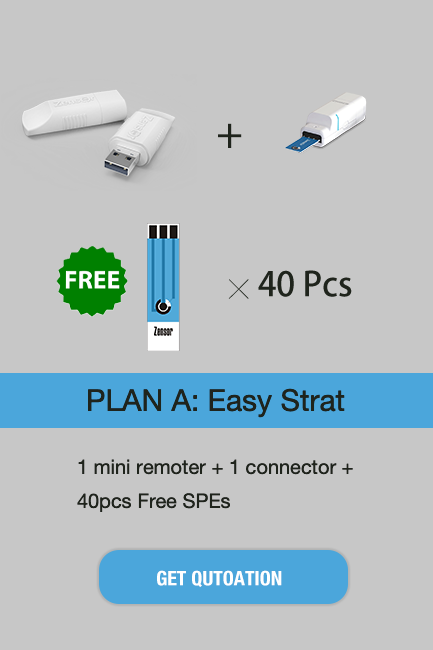
<style>
.page{position:relative;width:433px;height:650px;background:#c7c7c7}
.page>*{position:absolute;margin:0}
.t1{font:40px "AdobeHeitiStd-Regular";color:#1f241c}
.t2{font:33.3px "AdobeHeitiStd-Regular";color:#1f241c}
.t3{font:20px "SimHei";color:#1f241c}
.t4{font:30px "HelveticaNeue";color:#1f241c}
.t5{font:20px/33.8px "HelveticaNeue";color:#1f241c}
.t6{font:20px "HelveticaNeue-CondensedBold";color:#ffffff}
</style>
<div class="page">
<p class="t1" style="left:218px;top:123px;width:24px;height:25px">＋</p>
<p class="t2" style="left:228px;top:270px;width:124px;height:29px"><span class="t3">╳  </span>40 Pcs</p>
<p class="t4" style="left:88px;top:388px;width:257px;height:30px">PLAN A: Easy Strat Kit</p>
<p class="t5" style="left:77px;top:459px;width:276px;height:53px">1 mini remoter + 1 connector + 40pcs Free SPEs</p>
<p class="t6" style="left:157px;top:570px;width:125px;height:17px">GET QUTOATION</p>
</div>
